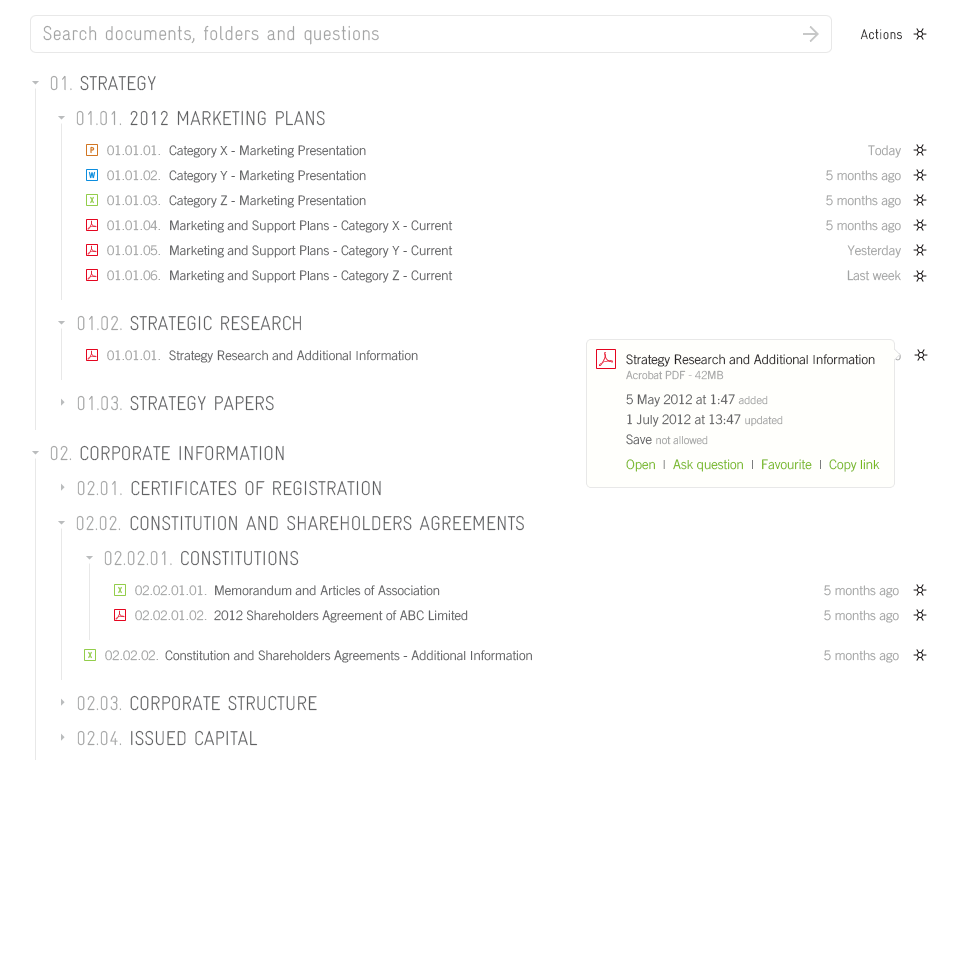
<style>
.page{position:relative;width:960px;height:970px;background:#ffffff}
.page>*{position:absolute;margin:0}
.t1{font:20px "Gravur-CondensedLight";color:#a3a4a4}
.t2{font:14px "Gravur-CondensedLight";letter-spacing:0.01em}
.t3{font:20px "Gravur-CondensedLight";letter-spacing:-0.01em;color:#5f6062}
.t4{font:20px "Gravur-CondensedLight";letter-spacing:-0.01em;color:#a3a4a4}
.t5{font:13px/25px "TradeGothic-Light";color:#a3a4a4}
.t6{font:13px/25px "TradeGothic-Light";color:#5f6062}
.t7{font:13px "TradeGothic-Light";color:#a3a4a4}
.t8{font:13px "TradeGothic-Light";color:#5f6062}
.t9{font:13px/25px "TradeGothic-Light"}
.t10{font:11px/15px "TradeGothic-Light"}
.t11{font:11px/20px "TradeGothic-Light"}
.t12{font:13px/20px "TradeGothic-Light"}
</style>
<div class="page">
<p class="t1" style="left:43px;top:25px;width:336px;height:20px">Search documents, folders and questions</p>
<p class="t2" style="left:860px;top:29px;width:42px;height:11px">Actions</p>
<p class="t3" style="left:50px;top:75px;width:106px;height:16px"><span class="t4">01. </span>STRATEGY</p>
<p class="t3" style="left:76px;top:110px;width:249px;height:16px"><span class="t4">01.01. </span>2012 MARKETING PLANS</p>
<p class="t5" style="left:107px;top:145px;width:53px;height:136px">01.01.01.<br>01.01.02.<br>01.01.03.<br>01.01.04.<br>01.01.05.<br>01.01.06.</p>
<p class="t6" style="left:169px;top:145px;width:284px;height:138px">Category X - Marketing Presentation<br>Category Y - Marketing Presentation<br>Category Z - Marketing Presentation<br>Marketing and Support Plans - Category X - Current<br>Marketing and Support Plans - Category Y - Current<br>Marketing and Support Plans - Category Z - Current</p>
<p class="t5" style="left:826px;top:145px;width:75px;height:136px;text-align:right">Today<br>5 months ago<br>5 months ago<br>5 months ago<br>Yesterday<br>Last week</p>
<p class="t3" style="left:77px;top:315px;width:224px;height:16px"><span class="t4">01.02. </span>STRATEGIC RESEARCH</p>
<p class="t7" style="left:107px;top:350px;width:53px;height:11px">01.01.01.</p>
<p class="t8" style="left:169px;top:350px;width:249px;height:13px">Strategy Research and Additional Information</p>
<p class="t9" style="left:626px;top:354px;width:254px;height:118px">Strategy Research and Additional Information<br><span class="t10">Acrobat PDF - 42MB<br></span>5 May 2012 at 1:47 <span class="t11">added<br></span><span class="t12">1 July 2012 at 13:47 </span><span class="t11">updated<br></span><span class="t12">Save </span><span class="t11">not allowed<br></span>Open  |  Ask question  |  Favourite  |  Copy link</p>
<p class="t3" style="left:77px;top:395px;width:197px;height:16px"><span class="t4">01.03. </span>STRATEGY PAPERS</p>
<p class="t3" style="left:50px;top:445px;width:234px;height:16px"><span class="t4">02. </span>CORPORATE INFORMATION</p>
<p class="t4" style="left:77px;top:480px;width:45px;height:16px">02.01.</p>
<p class="t3" style="left:131px;top:480px;width:250px;height:16px">CERTIFICATES OF REGISTRATION</p>
<p class="t4" style="left:76px;top:515px;width:45px;height:16px">02.02.</p>
<p class="t3" style="left:130px;top:515px;width:394px;height:16px">CONSTITUTION AND SHAREHOLDERS AGREEMENTS</p>
<p class="t3" style="left:104px;top:550px;width:195px;height:16px"><span class="t4">02.02.01. </span>CONSTITUTIONS</p>
<p class="t7" style="left:135px;top:585px;width:72px;height:11px">02.02.01.01.</p>
<p class="t8" style="left:215px;top:585px;width:225px;height:11px">Memorandum and Articles of Association</p>
<p class="t5" style="left:824px;top:585px;width:75px;height:38px;text-align:right">5 months ago<br>5 months ago</p>
<p class="t7" style="left:135px;top:610px;width:72px;height:11px">02.02.01.02.</p>
<p class="t8" style="left:214px;top:610px;width:254px;height:13px">2012 Shareholders Agreement of ABC Limited</p>
<p class="t7" style="left:105px;top:650px;width:53px;height:11px">02.02.02.</p>
<p class="t8" style="left:165px;top:650px;width:367px;height:13px">Constitution and Shareholders Agreements - Additional Information</p>
<p class="t7" style="left:824px;top:650px;width:75px;height:13px">5 months ago</p>
<p class="t4" style="left:77px;top:695px;width:45px;height:16px">02.03.</p>
<p class="t3" style="left:130px;top:695px;width:187px;height:16px">CORPORATE STRUCTURE</p>
<p class="t4" style="left:77px;top:730px;width:45px;height:16px">02.04.</p>
<p class="t3" style="left:131px;top:730px;width:127px;height:16px">ISSUED CAPITAL</p>
</div>
